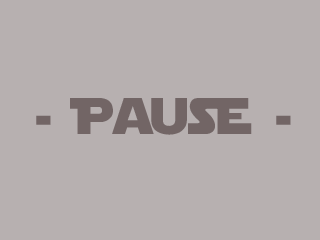
<style>
.page{position:relative;width:320px;height:240px;background:#b7b0b0}
.page>*{position:absolute;margin:0}
.t1{font:51.1px "StarJediFixed";color:#726565}
</style>
<div class="page">
<p class="t1" style="left:36px;top:98px;width:255px;height:37px">- Pause -</p>
</div>
